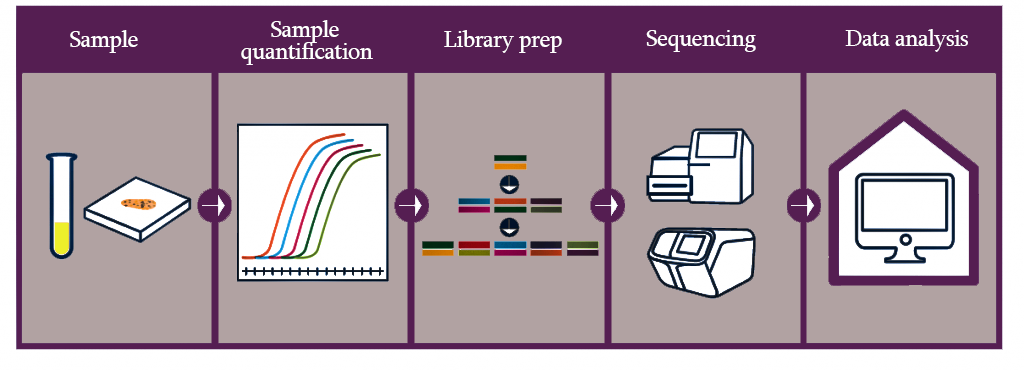
<style>
.page{position:relative;width:1024px;height:371px;background:#b1a2a2}
.page>*{position:absolute;margin:0}
.t1{font:24px "Sylfaen";letter-spacing:-0.025em;color:#ffffff}
</style>
<div class="page">
<p class="t1" style="left:70px;top:30px;width:68px;height:23px">Sample</p>
<p class="t1" style="left:271px;top:20px;width:68px;height:23px">Sample</p>
<p class="t1" style="left:444px;top:30px;width:118px;height:23px">Library prep</p>
<p class="t1" style="left:646px;top:30px;width:110px;height:22px">Sequencing</p>
<p class="t1" style="left:845px;top:29px;width:123px;height:23px">Data analysis</p>
<p class="t1" style="left:241px;top:42px;width:132px;height:23px">quantification</p>
</div>
